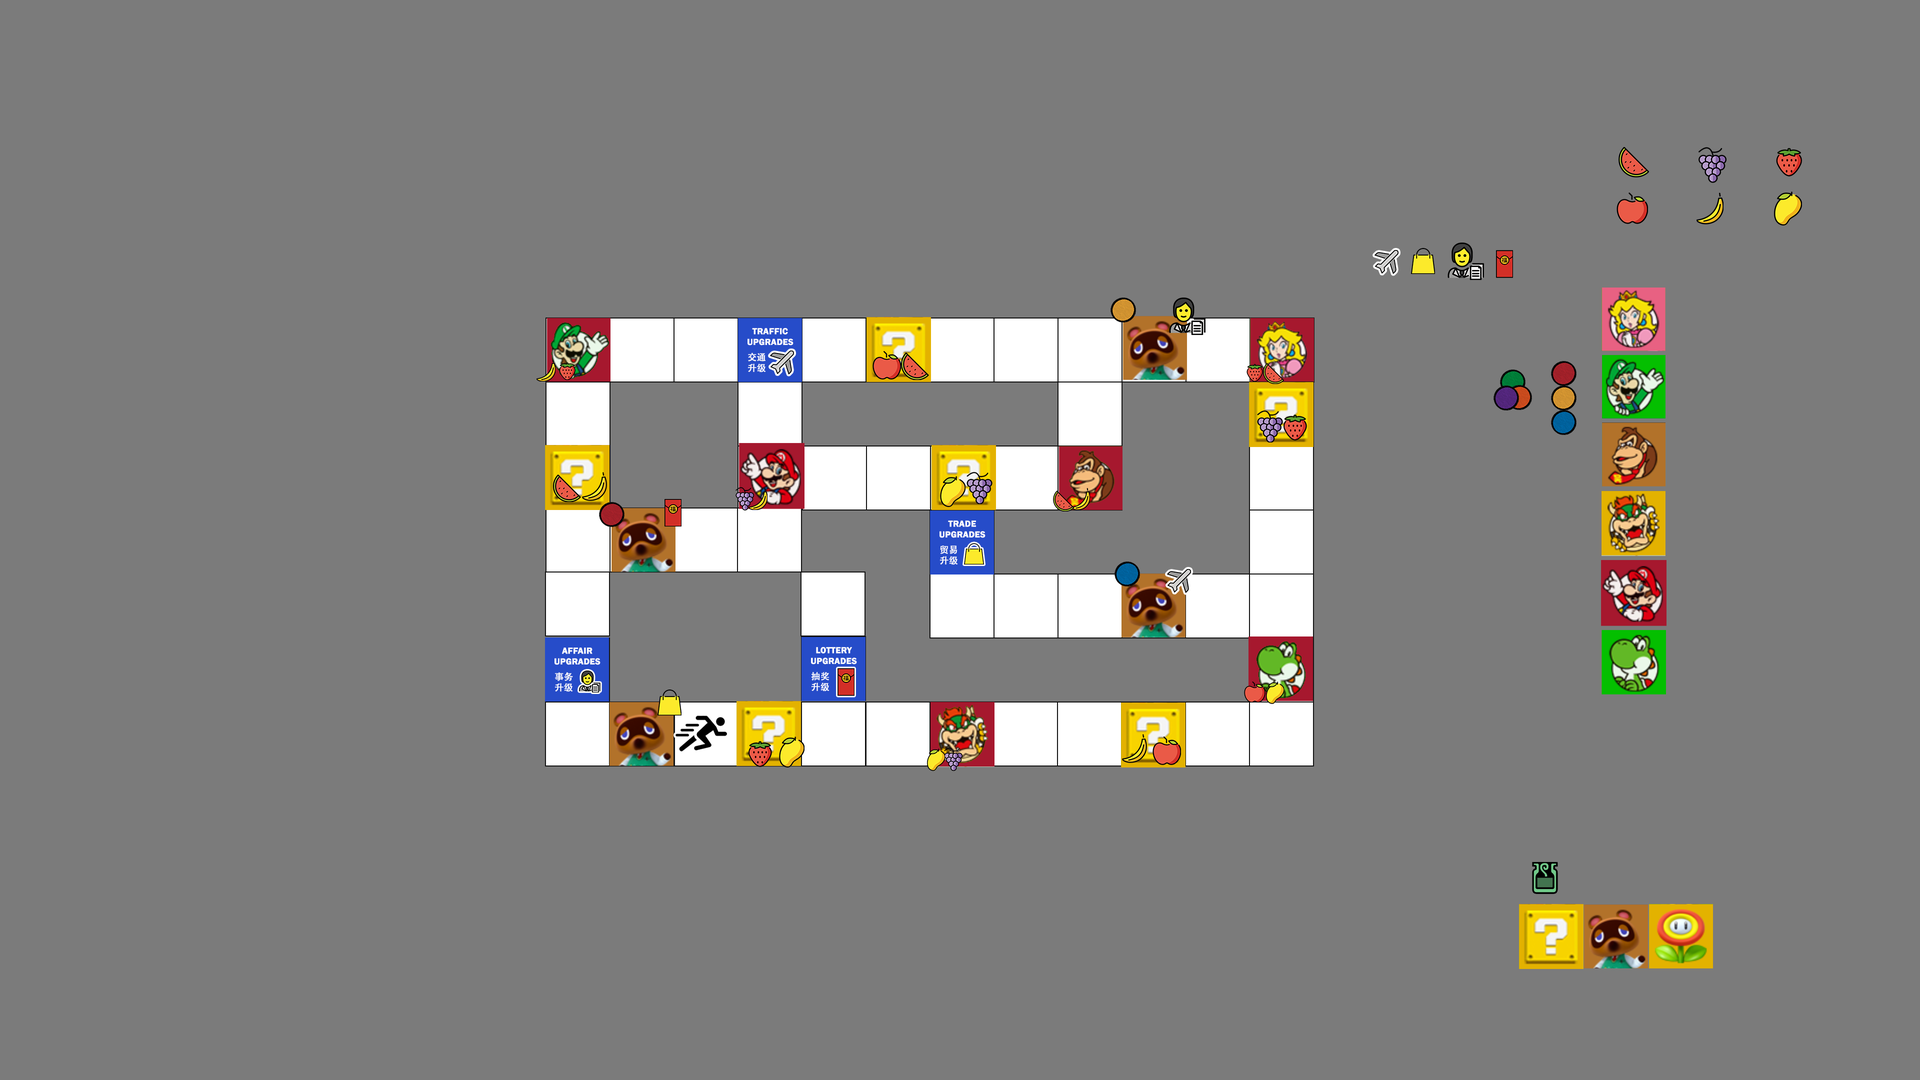
<style>
.page{position:relative;width:1920px;height:1080px;background:#7b7b7b}
.page>*{position:absolute;margin:0}
.t1{font:9px "FranklinGothic-Demi";color:#ffffff;font-weight:bold}
.t2{font:9px "AdobeHeitiStd-Regular";color:#ffffff;font-weight:bold}
</style>
<div class="page">
<p class="t1" style="left:748px;top:328px;width:46px;height:18px;text-align:center">TRAFFIC<br>UPGRADES</p>
<p class="t2" style="left:748px;top:352px;width:18px;height:20px;text-align:center">交通<br>升级</p>
<p class="t1" style="left:940px;top:520px;width:46px;height:18px;text-align:center">TRADE<br>UPGRADES</p>
<p class="t2" style="left:940px;top:546px;width:18px;height:19px;text-align:center">贸易<br>升级</p>
<p class="t1" style="left:554px;top:648px;width:46px;height:17px;text-align:center">AFFAIR<br>UPGRADES</p>
<p class="t1" style="left:811px;top:647px;width:46px;height:17px;text-align:center">LOTTERY<br>UPGRADES</p>
<p class="t2" style="left:555px;top:672px;width:18px;height:20px;text-align:center">事务<br>升级</p>
<p class="t2" style="left:811px;top:672px;width:19px;height:20px;text-align:center">抽奖<br>升级</p>
</div>
